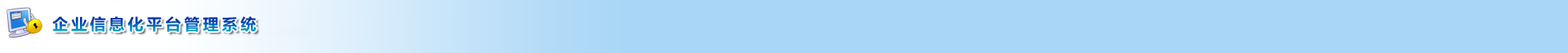
<style>
.page{position:relative;width:1568px;height:53px;background:#a9d6f6}
.page>*{position:absolute;margin:0}
.t1{font:15.7px "MicrosoftYaHei";letter-spacing:0.2em}
</style>
<div class="page">
<p class="t1" style="left:53px;top:16px;width:203px;height:16px">企业信息化平台管理系统</p>
</div>
